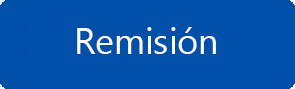
<style>
.page{position:relative;width:295px;height:89px;background:#0050a9}
.page>*{position:absolute;margin:0}
.t1{font:36px "Gadugi";color:#fdfdfe}
</style>
<div class="page">
<p class="t1" style="left:77px;top:27px;width:139px;height:27px">Remisión</p>
</div>
